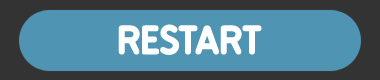
<style>
.page{position:relative;width:380px;height:80px;background:#4f95b3}
.page>*{position:absolute;margin:0}
.t1{font:37.5px "BPreplay-Bold";color:#ffffff}
</style>
<div class="page">
<p class="t1" style="left:118px;top:24px;width:144px;height:31px">RESTART</p>
</div>
